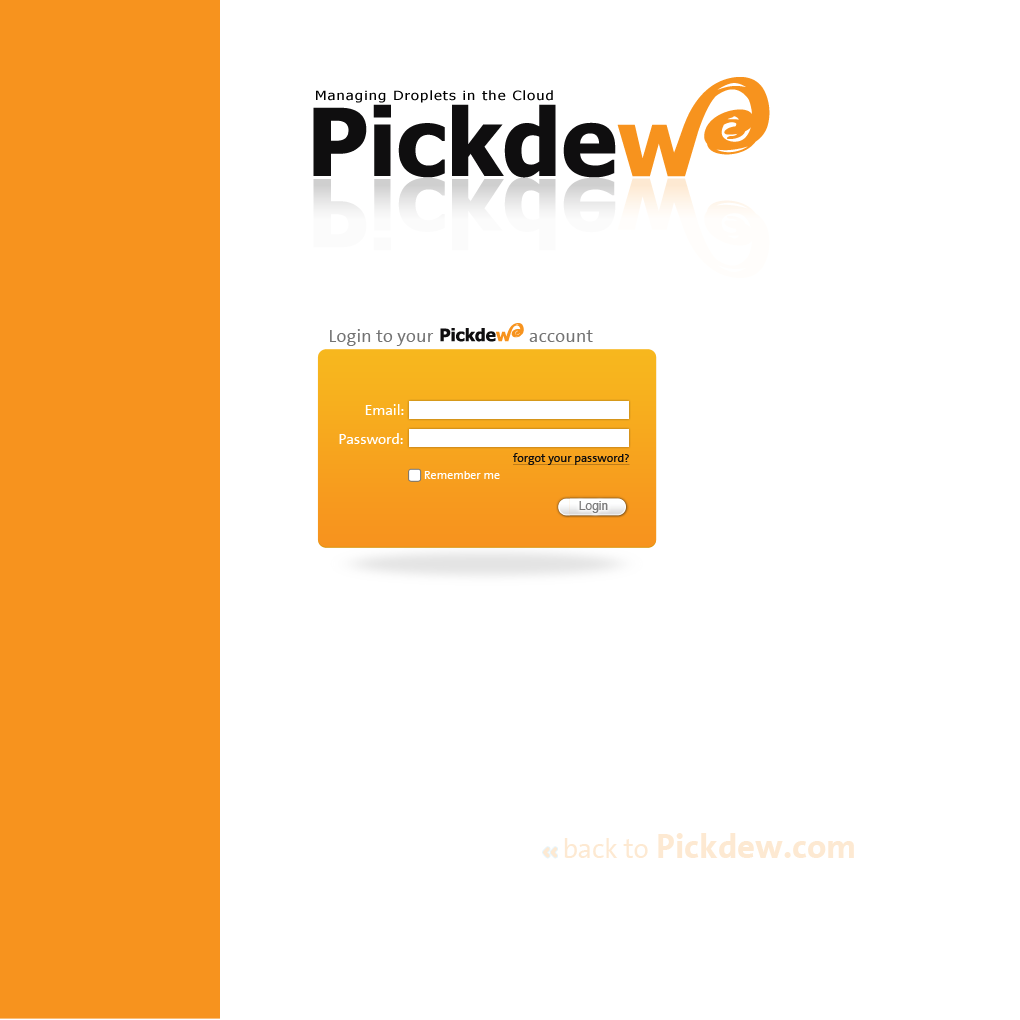
<style>
.page{position:relative;width:1020px;height:1020px;background:#ffffff}
.page>*{position:absolute;margin:0}
.t1{font:18.5px "TheSansCorrespondence";color:#737373}
.t2{font:14.7px "TheSansCorrespondence";color:#ffffff}
.t3{font:11.9px "TheSansCorrespondence";color:#0f0e0f;text-decoration:underline}
.t4{font:11.9px "TheSansCorrespondence";color:#ffffff}
.t5{font:12px "Helvetica";color:#8b8b8b}
.t6{font:34.8px "TheSansCorrespondence-Bold";color:#fde9d2}
.t7{font:27.9px "TheSansCorrespondence";letter-spacing:-0.01em;color:#fde9d2}
</style>
<div class="page">
<p class="t1" style="left:330px;top:329px;width:263px;height:17px">Login to your                       account</p>
<p class="t2" style="left:365px;top:404px;width:39px;height:11px">Email:</p>
<p class="t2" style="left:339px;top:433px;width:64px;height:11px">Password:</p>
<p class="t3" style="left:513px;top:453px;width:117px;height:12px">forgot your password?</p>
<p class="t4" style="left:424px;top:471px;width:76px;height:8px">Remember me</p>
<p class="t5" style="left:579px;top:501px;width:29px;height:12px">Login</p>
<p class="t6" style="left:564px;top:833px;width:290px;height:25px"><span class="t7"> back to </span>Pickdew.com</p>
</div>
